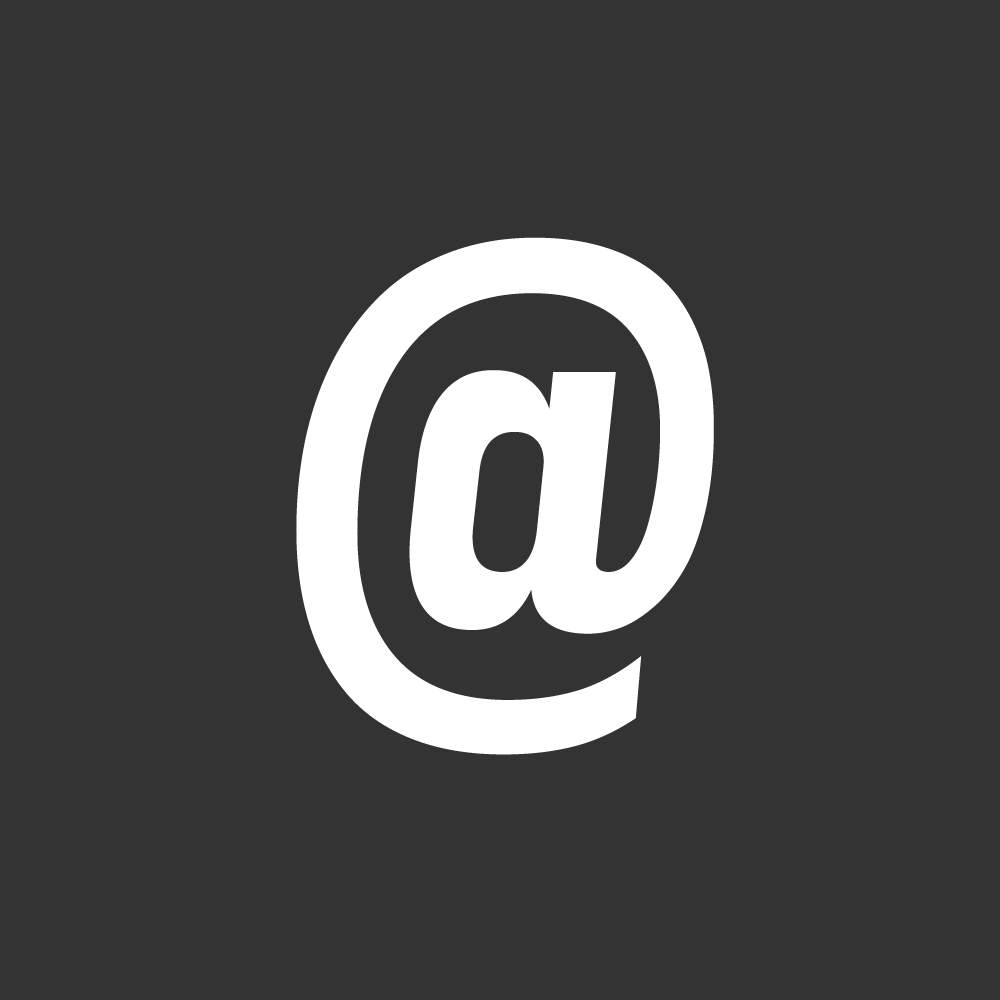
<style>
.page{position:relative;width:1000px;height:1000px;background:#333333}
.page>*{position:absolute;margin:0}
.t1{font:645.3px "BebasNeue";letter-spacing:-0.01em;color:#ffffff}
</style>
<div class="page">
<p class="t1" style="left:296px;top:237px;width:418px;height:518px">@</p>
</div>
